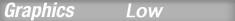
<style>
.page{position:relative;width:235px;height:21px;background:#b2b2b2}
.page>*{position:absolute;margin:0}
.t1{font:20px "HelveticaNeueLTPro-BdCnO";color:#ffffff}
.t2{font:20px "MyriadPro-Regular";color:#ffffff;font-weight:bold;font-style:italic}
</style>
<div class="page">
<p class="t1" style="left:4px;top:2px;width:71px;height:19px">Graphics</p>
<p class="t2" style="left:126px;top:3px;width:38px;height:15px">Low</p>
</div>
